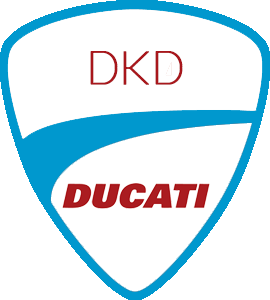
<style>
.page{position:relative;width:270px;height:300px;background:#ffffff}
.page>*{position:absolute;margin:0}
.t1{font:48px "Adam";color:#a8171c;font-weight:bold}
</style>
<div class="page">
<p class="t1" style="left:90px;top:51px;width:93px;height:34px">DKD</p>
</div>
